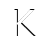
<style>
.page{position:relative;width:48px;height:48px;background:#ffffff}
.page>*{position:absolute;margin:0}
.t1{font:41.7px "Corbel"}
</style>
<div class="page">
<p class="t1" style="left:14px;top:9px;width:22px;height:27px">K</p>
</div>
